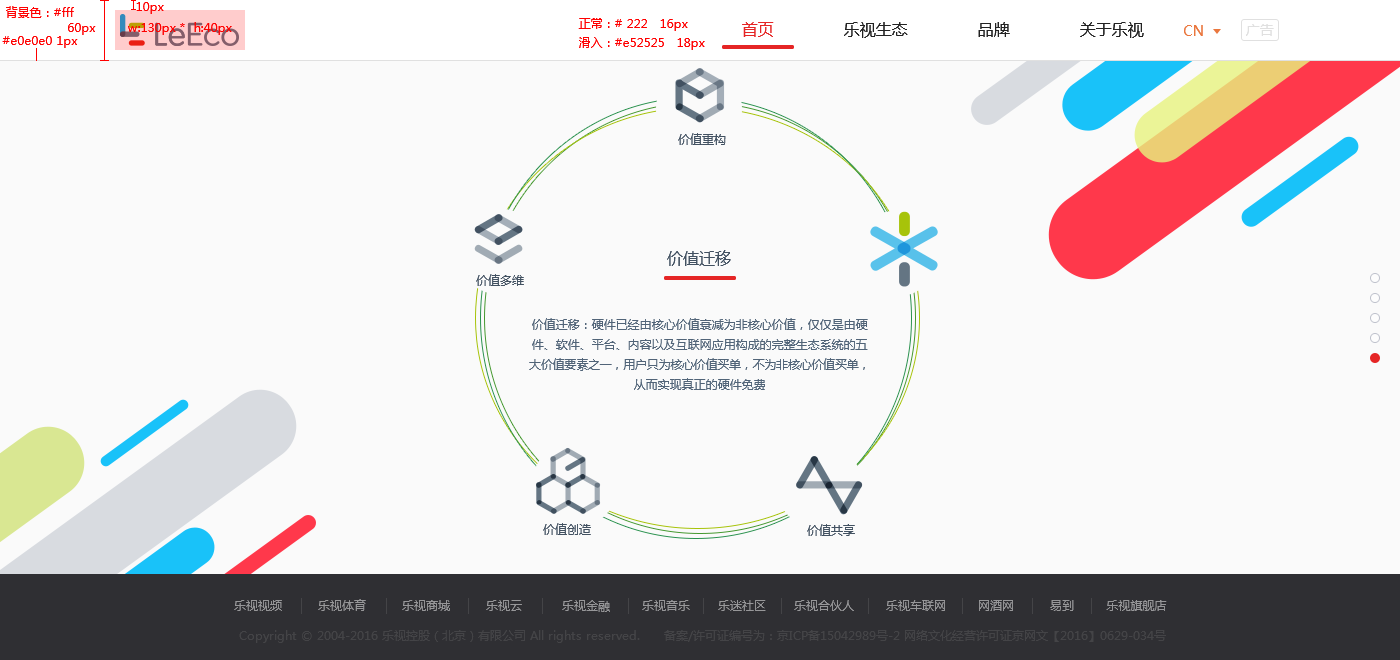
<style>
.page{position:relative;width:1400px;height:660px;background:#fafafa}
.page>*{position:absolute;margin:0}
.t1{font:12px "MicrosoftYaHei";color:#ff0000}
.t2{font:16px "MicrosoftYaHei";color:#222222}
.t3{font:16px "MicrosoftYaHei";color:#e52525}
.t4{font:14px "MicrosoftYaHei";color:#ea773e}
.t5{font:14px "MicrosoftYaHei";color:#e0e0e0}
.t6{font:12px "MicrosoftYaHei";color:#425161}
.t7{font:16px "MicrosoftYaHei";color:#425161}
.t8{font:12px/20px "MicrosoftYaHei";color:#516478}
.t9{font:12px/20px "MicrosoftYaHei";letter-spacing:-0.02em;color:#516478}
.t10{font:12px "MicrosoftYaHei";color:#979799}
.t11{font:12px "MicrosoftYaHei";color:#444447}
</style>
<div class="page">
<p class="t1" style="left:6px;top:6px;width:68px;height:12px">背景色：#fff</p>
<p class="t1" style="left:136px;top:2px;width:28px;height:12px">10px</p>
<p class="t1" style="left:68px;top:23px;width:28px;height:12px">60px</p>
<p class="t1" style="left:128px;top:22px;width:104px;height:13px">w:130px *  h:40px</p>
<p class="t1" style="left:578px;top:18px;width:110px;height:13px">正常：# 222   16px</p>
<p class="t2" style="left:742px;top:22px;width:402px;height:16px"><span class="t3">首页 </span>             乐视生态              品牌              关于乐视</p>
<p class="t4" style="left:1184px;top:25px;width:19px;height:11px">CN</p>
<p class="t5" style="left:1246px;top:24px;width:28px;height:12px">广告</p>
<p class="t1" style="left:2px;top:36px;width:76px;height:12px">#e0e0e0 1px</p>
<p class="t1" style="left:579px;top:37px;width:126px;height:13px">滑入：#e52525   18px</p>
<p class="t6" style="left:678px;top:133px;width:48px;height:12px">价值重构</p>
<p class="t7" style="left:667px;top:250px;width:64px;height:16px">价值迁移</p>
<p class="t6" style="left:476px;top:274px;width:48px;height:12px">价值多维</p>
<p class="t8" style="left:529px;top:318px;width:339px;height:72px;text-align:center">价值迁移：硬件已经由核心价值衰减为非核心价值，仅仅是由硬件、软件、平台、内容以及互联网应用构成的完整生态系统的五<span class="t9">大价值要素之一，用户只为核心价值买单，不为非核心价值买单，</span>从而实现真正的硬件免费</p>
<p class="t6" style="left:543px;top:523px;width:48px;height:12px">价值创造</p>
<p class="t6" style="left:807px;top:524px;width:48px;height:12px">价值共享</p>
<p class="t10" style="left:234px;top:599px;width:933px;height:13px">乐视视频         乐视体育         乐视商城         乐视云          乐视金融        乐视音乐       乐迷社区       乐视合伙人        乐视车联网        网酒网         易到        乐视旗舰店</p>
<p class="t11" style="left:239px;top:630px;width:927px;height:13px">Copyright © 2004-2016 乐视控股（北京）有限公司 All rights reserved.      备案/许可证编号为：京ICP备15042989号-2 网络文化经营许可证京网文【2016】0629-034号</p>
</div>
